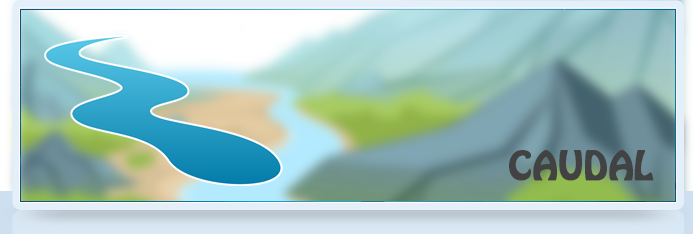
<style>
.page{position:relative;width:693px;height:234px}
.page>*{position:absolute;margin:0}
.t1{font:35.6px "HoboStd";color:#424242;text-transform:uppercase;font-weight:bold}
</style>
<div class="page">
<p class="t1" style="left:509px;top:150px;width:145px;height:31px">Caudal</p>
</div>
